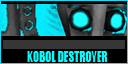
<style>
.page{position:relative;width:128px;height:64px;background:#000000}
.page>*{position:absolute;margin:0}
.t1{font:14px "Impact";color:#00fffc;scale:0.8 1}
</style>
<div class="page">
<p class="t1" style="left:27px;top:51px;width:80px;height:11px">KOBOL DESTROYER</p>
</div>
